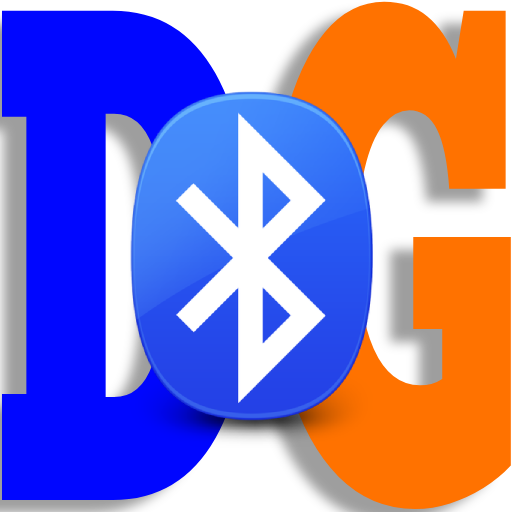
<style>
.page{position:relative;width:512px;height:512px;background:#0006ff}
.page>*{position:absolute;margin:0}
.t1{font:629.5px "Bevan-Regular";color:#0006ff;scale:0.5 1}
.t2{font:629.5px "Bevan-Regular";color:#ff7200;scale:0.5 1}
</style>
<div class="page">
<p class="t1" style="left:1px;top:1px;width:510px;height:508px">D<span class="t2">G</span></p>
</div>
